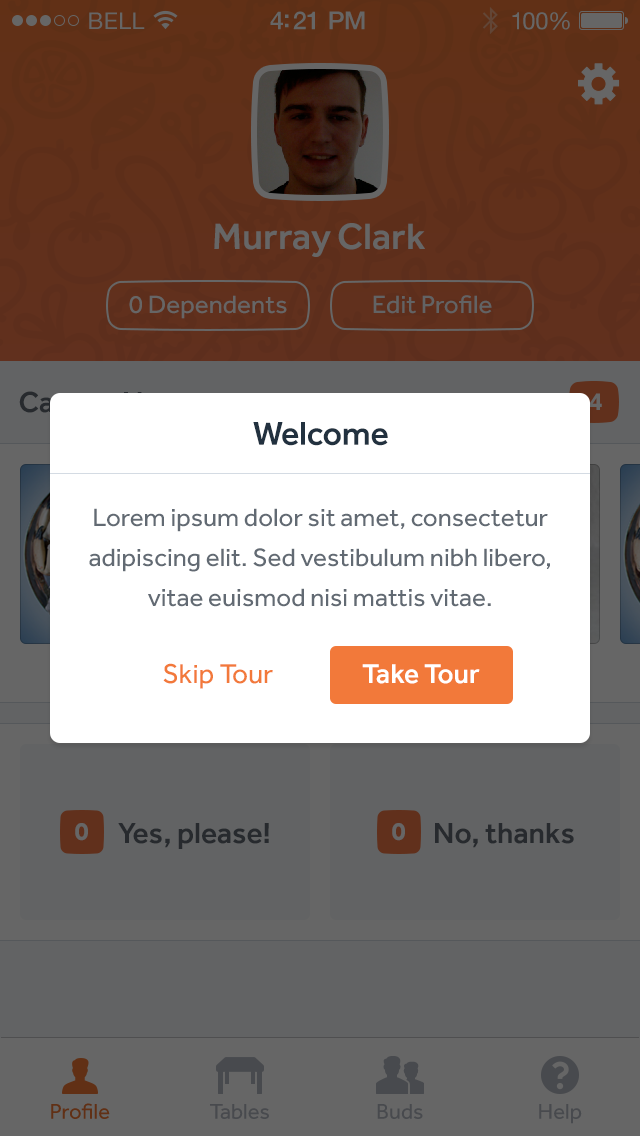
<style>
.page{position:relative;width:640px;height:1136px;background:#626364}
.page>*{position:absolute;margin:0}
.t1{font:23px "HelveticaNeue";letter-spacing:0.02em;color:#666666}
.t2{font:25px "HelveticaNeue-Medium";letter-spacing:-0.02em;color:#666666}
.t3{font:24px "HelveticaNeue";letter-spacing:-0.02em;color:#666666}
.t4{font:38px "Effra-Medium";color:#666666}
.t5{font:26px "Effra-Regular";color:#666666}
.t6{font:26px "Effra-Regular";color:#626364}
.t7{font:26px "Effra-Bold";color:#666666}
.t8{font:34px "Effra-Medium";letter-spacing:-0.01em;color:#22313f}
.t9{font:26px/40px "Effra-Regular";color:#626a73}
.t10{font:28px "Effra-Regular";color:#f2793a}
.t11{font:28px "Effra-Medium";color:#ffffff}
.t12{font:30px "Effra-Medium";color:#272a2e}
.t13{font:22px "Effra-Regular";color:#613015}
.t14{font:22px "Effra-Regular";color:#484a4e}
</style>
<div class="page">
<p class="t1" style="left:89px;top:12px;width:56px;height:17px">BELL</p>
<p class="t2" style="left:270px;top:11px;width:95px;height:19px">4:21 PM</p>
<p class="t3" style="left:512px;top:12px;width:58px;height:18px">100%</p>
<p class="t4" style="left:214px;top:223px;width:211px;height:34px">Murray Clark</p>
<p class="t5" style="left:129px;top:295px;width:158px;height:24px">0 Dependents</p>
<p class="t6" style="left:373px;top:295px;width:119px;height:19px">Edit Profile</p>
<p class="t7" style="left:589px;top:393px;width:13px;height:17px">4</p>
<p class="t8" style="left:253px;top:422px;width:135px;height:24px">Welcome</p>
<p class="t9" style="left:89px;top:508px;width:461px;height:99px;text-align:center">Lorem ipsum dolor sit amet, consectetur adipiscing elit. Sed vestibulum nibh libero, vitae euismod nisi mattis vitae.</p>
<p class="t10" style="left:163px;top:663px;width:110px;height:26px">Skip Tour</p>
<p class="t11" style="left:362px;top:664px;width:118px;height:20px">Take Tour</p>
<p class="t7" style="left:75px;top:823px;width:13px;height:18px">0</p>
<p class="t12" style="left:118px;top:823px;width:151px;height:26px">Yes, please!</p>
<p class="t7" style="left:392px;top:823px;width:13px;height:18px">0</p>
<p class="t12" style="left:435px;top:823px;width:139px;height:25px">No, thanks</p>
<p class="t13" style="left:51px;top:1103px;width:59px;height:16px">Profile</p>
<p class="t14" style="left:210px;top:1104px;width:59px;height:15px">Tables</p>
<p class="t14" style="left:377px;top:1104px;width:46px;height:15px">Buds</p>
<p class="t14" style="left:539px;top:1104px;width:43px;height:20px">Help</p>
</div>
